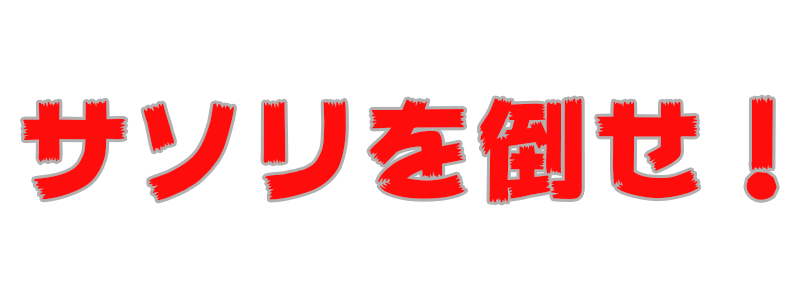
<style>
.page{position:relative;width:800px;height:300px;background:#ffffff}
.page>*{position:absolute;margin:0}
.t1{font:112.7px "RoBrushStd-UB";letter-spacing:0.02em;color:#ff0d0d}
</style>
<div class="page">
<p class="t1" style="left:22px;top:97px;width:755px;height:106px">サソリを倒せ！</p>
</div>
